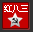
<style>
.page{position:relative;width:33px;height:32px;background:#c50000}
.page>*{position:absolute;margin:0}
.t1{font:10.4px "SimSun";letter-spacing:-0.25em;color:#ffffff}
</style>
<div class="page">
<p class="t1" style="left:4px;top:5px;width:24px;height:8px">红八三</p>
</div>
